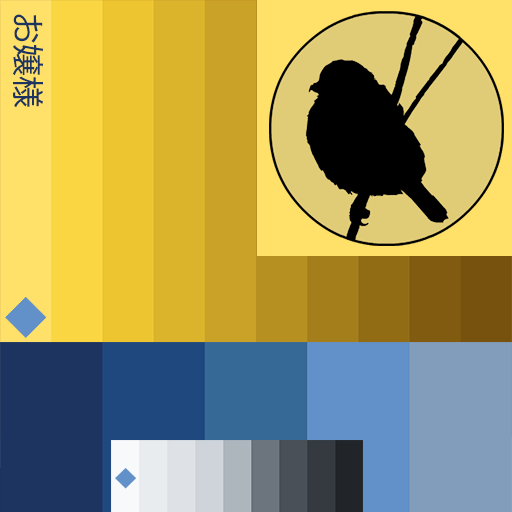
<style>
.page{position:relative;width:512px;height:512px}
.page>*{position:absolute;margin:0}
.t1{font:32px "KozGoPr6N-Regular";color:#1d3461}
</style>
<div class="page">
<p class="t1" style="left:13px;top:14px;width:30px;height:94px;rotate:90deg">お嬢様</p>
</div>
